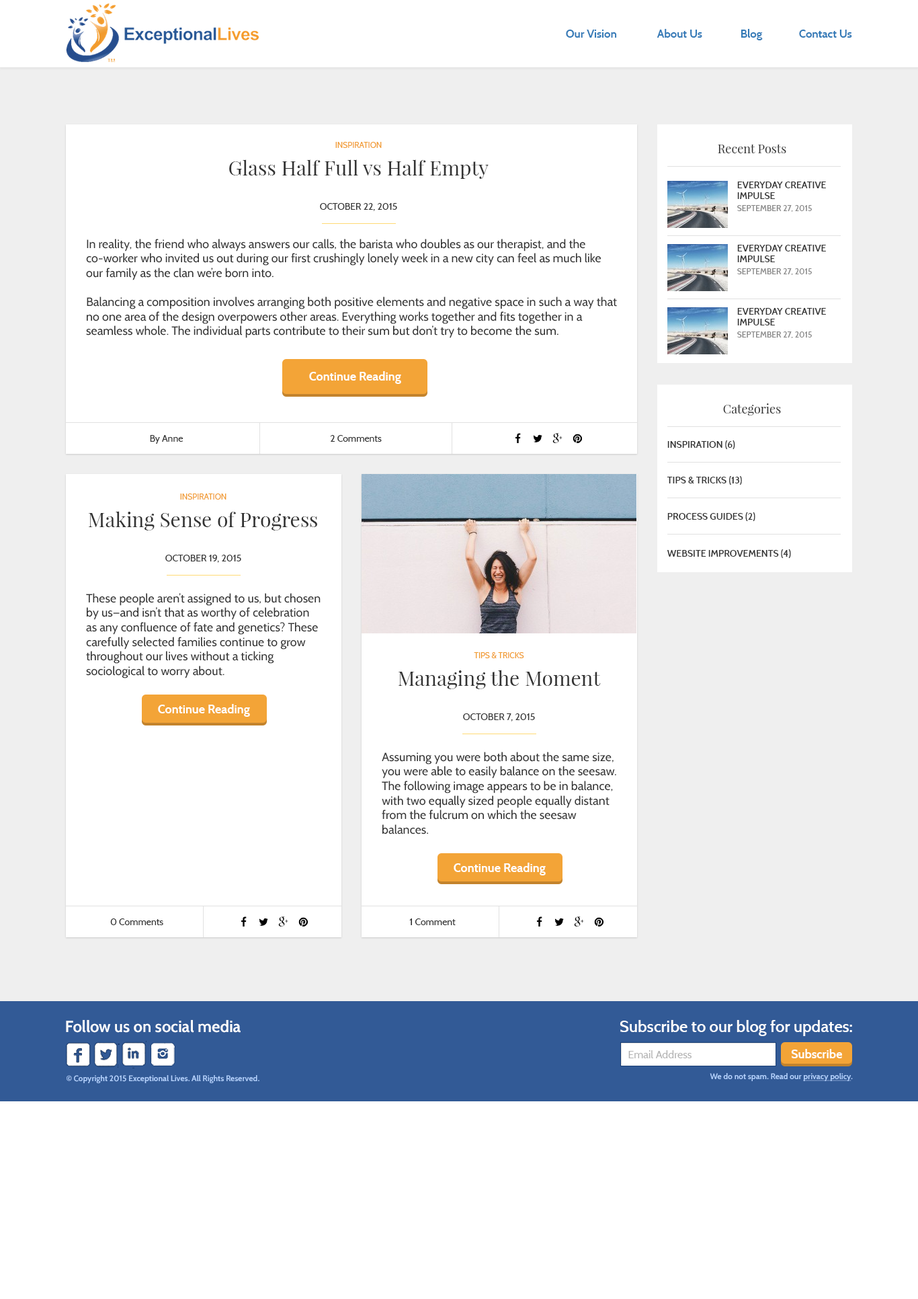
<style>
.page{position:relative;width:918px;height:1299px;background:#ffffff}
.page>*{position:absolute;margin:0}
.t1{font:11.3px "Cabin-SemiBold";color:#337ab7}
.t2{font:8.1px "Cabin-Regular";color:#f19b2e}
.t3{font:12.1px "PlayfairDisplay-Regular";color:#333333}
.t4{font:20.2px "PlayfairDisplay-Regular";color:#333333}
.t5{font:9.4px "Cabin-SemiBold";color:#333333}
.t6{font:9.4px "Cabin-Regular";color:#333333}
.t7{font:8.1px "Cabin-SemiBold";color:#888888}
.t8{font:12.1px "Cabin-Regular";color:#333333}
.t9{font:12.1px "Cabin-Bold";color:#ffffff}
.t10{font:16.1px "Cabin-SemiBold";color:#ffffff}
.t11{font:10.8px "Cabin-Regular";color:#b3b3b3}
.t12{font:8.1px "Cabin-SemiBold";color:#b5d3ff}
.t13{font:8.1px "Cabin-SemiBold";color:#b5d3ff;text-decoration:underline}
</style>
<div class="page">
<p class="t1" style="left:566px;top:30px;width:51px;height:8px">Our Vision</p>
<p class="t1" style="left:657px;top:29px;width:45px;height:9px">About Us</p>
<p class="t1" style="left:741px;top:29px;width:22px;height:11px">Blog</p>
<p class="t1" style="left:799px;top:30px;width:53px;height:8px">Contact Us</p>
<p class="t2" style="left:335px;top:142px;width:47px;height:6px">INSPIRATION</p>
<p class="t3" style="left:718px;top:144px;width:68px;height:9px">Recent Posts</p>
<p class="t4" style="left:229px;top:159px;width:260px;height:20px">Glass Half Full vs Half Empty</p>
<p class="t5" style="left:737px;top:181px;width:89px;height:18px">EVERYDAY CREATIVE IMPULSE</p>
<p class="t6" style="left:320px;top:203px;width:77px;height:8px">OCTOBER 22, 2015</p>
<p class="t7" style="left:737px;top:205px;width:75px;height:7px">SEPTEMBER 27, 2015</p>
<p class="t8" style="left:86px;top:239px;width:531px;height:99px">In reality, the friend who always answers our calls, the barista who doubles as our therapist, and the co-worker who invited us out during our first crushingly lonely week in a new city can feel as much like our family as the clan we’re born into.<br><br>Balancing a composition involves arranging both positive elements and negative space in such a way that no one area of the design overpowers other areas. Everything works together and fits together in a seamless whole. The individual parts contribute to their sum but don’t try to become the sum.</p>
<p class="t5" style="left:737px;top:245px;width:89px;height:17px">EVERYDAY CREATIVE IMPULSE</p>
<p class="t7" style="left:737px;top:268px;width:75px;height:7px">SEPTEMBER 27, 2015</p>
<p class="t5" style="left:737px;top:308px;width:89px;height:17px">EVERYDAY CREATIVE IMPULSE</p>
<p class="t7" style="left:737px;top:331px;width:75px;height:7px">SEPTEMBER 27, 2015</p>
<p class="t9" style="left:309px;top:371px;width:92px;height:13px">Continue Reading</p>
<p class="t3" style="left:723px;top:403px;width:58px;height:12px">Categories</p>
<p class="t6" style="left:150px;top:435px;width:34px;height:9px">By Anne</p>
<p class="t6" style="left:330px;top:435px;width:52px;height:7px">2 Comments</p>
<p class="t5" style="left:667px;top:440px;width:68px;height:9px">INSPIRATION (6)</p>
<p class="t5" style="left:667px;top:476px;width:75px;height:9px">TIPS &amp; TRICKS (13)</p>
<p class="t2" style="left:180px;top:493px;width:47px;height:6px">INSPIRATION</p>
<p class="t4" style="left:88px;top:511px;width:229px;height:19px">Making Sense of Progress</p>
<p class="t5" style="left:667px;top:512px;width:89px;height:9px">PROCESS GUIDES (2)</p>
<p class="t6" style="left:165px;top:555px;width:76px;height:8px">OCTOBER 19, 2015</p>
<p class="t5" style="left:667px;top:549px;width:124px;height:9px">WEBSITE IMPROVEMENTS (4)</p>
<p class="t8" style="left:86px;top:593px;width:235px;height:85px">These people aren’t assigned to us, but chosen by us—and isn’t that as worthy of celebration as any confluence of fate and genetics? These carefully selected families continue to grow throughout our lives without a ticking sociological to worry about.</p>
<p class="t2" style="left:474px;top:652px;width:50px;height:6px">TIPS &amp; TRICKS</p>
<p class="t4" style="left:398px;top:669px;width:203px;height:20px">Managing the Moment</p>
<p class="t9" style="left:158px;top:704px;width:92px;height:13px">Continue Reading</p>
<p class="t6" style="left:463px;top:713px;width:72px;height:8px">OCTOBER 7, 2015</p>
<p class="t8" style="left:382px;top:752px;width:234px;height:82px">Assuming you were both about the same size, you were able to easily balance on the seesaw. The following image appears to be in balance, with two equally sized people equally distant from the fulcrum on which the seesaw balances.</p>
<p class="t9" style="left:454px;top:862px;width:92px;height:13px">Continue Reading</p>
<p class="t6" style="left:110px;top:918px;width:53px;height:7px">0 Comments</p>
<p class="t6" style="left:409px;top:918px;width:47px;height:7px">1 Comment</p>
<p class="t10" style="left:66px;top:1020px;width:175px;height:12px">Follow us on social media</p>
<p class="t10" style="left:620px;top:1020px;width:232px;height:16px">Subscribe to our blog for updates:</p>
<p class="t11" style="left:628px;top:1050px;width:64px;height:8px">Email Address</p>
<p class="t9" style="left:791px;top:1049px;width:51px;height:9px">Subscribe</p>
<p class="t12" style="left:710px;top:1073px;width:143px;height:8px">We do not spam. Read our <span class="t13">privacy policy</span>.</p>
<p class="t12" style="left:67px;top:1075px;width:192px;height:8px">© Copyright 2015 Exceptional Lives. All Rights Reserved.</p>
</div>
